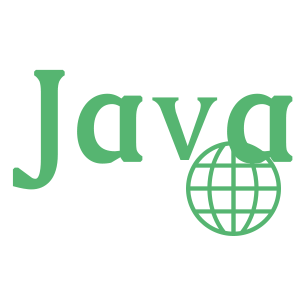
<style>
.page{position:relative;width:300px;height:300px;background:#ffffff}
.page>*{position:absolute;margin:0}
.t1{font:135px "Weibei-SC-Bold";color:#56b571;font-weight:bold}
</style>
<div class="page">
<p class="t1" style="left:12px;top:69px;width:281px;height:121px">Java</p>
</div>
